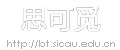
<style>
.page{position:relative;width:120px;height:50px;background:#ffffff}
.page>*{position:absolute;margin:0}
.t1{font:10px "CenturyGothic";color:#b0b0b0}
</style>
<div class="page">
<p class="t1" style="left:7px;top:40px;width:108px;height:9px">http://bt.sicau.edu.cn</p>
</div>
